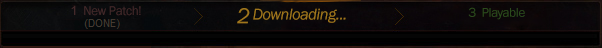
<style>
.page{position:relative;width:602px;height:48px}
.page>*{position:absolute;margin:0}
.t1{font:13px "FranklinGothic-Book";letter-spacing:-0.025em;color:#43292a}
.t2{font:13px "ArialMT";letter-spacing:-0.025em;color:#43292a}
.t3{font:22px "FranklinGothic-BookItalic";letter-spacing:-0.025em;color:#9f761c}
.t4{font:16px "FranklinGothic-BookItalic";letter-spacing:-0.025em;color:#9f761c}
.t5{font:13px "FranklinGothic-Book";letter-spacing:-0.025em;color:#2b4a1c}
</style>
<div class="page">
<p class="t1" style="left:71px;top:5px;width:70px;height:11px"><span class="t2">1</span>  New Patch!</p>
<p class="t3" style="left:237px;top:8px;width:13px;height:16px">2</p>
<p class="t4" style="left:253px;top:8px;width:93px;height:15px">Downloading...</p>
<p class="t5" style="left:468px;top:7px;width:57px;height:13px">3  Playable</p>
</div>
